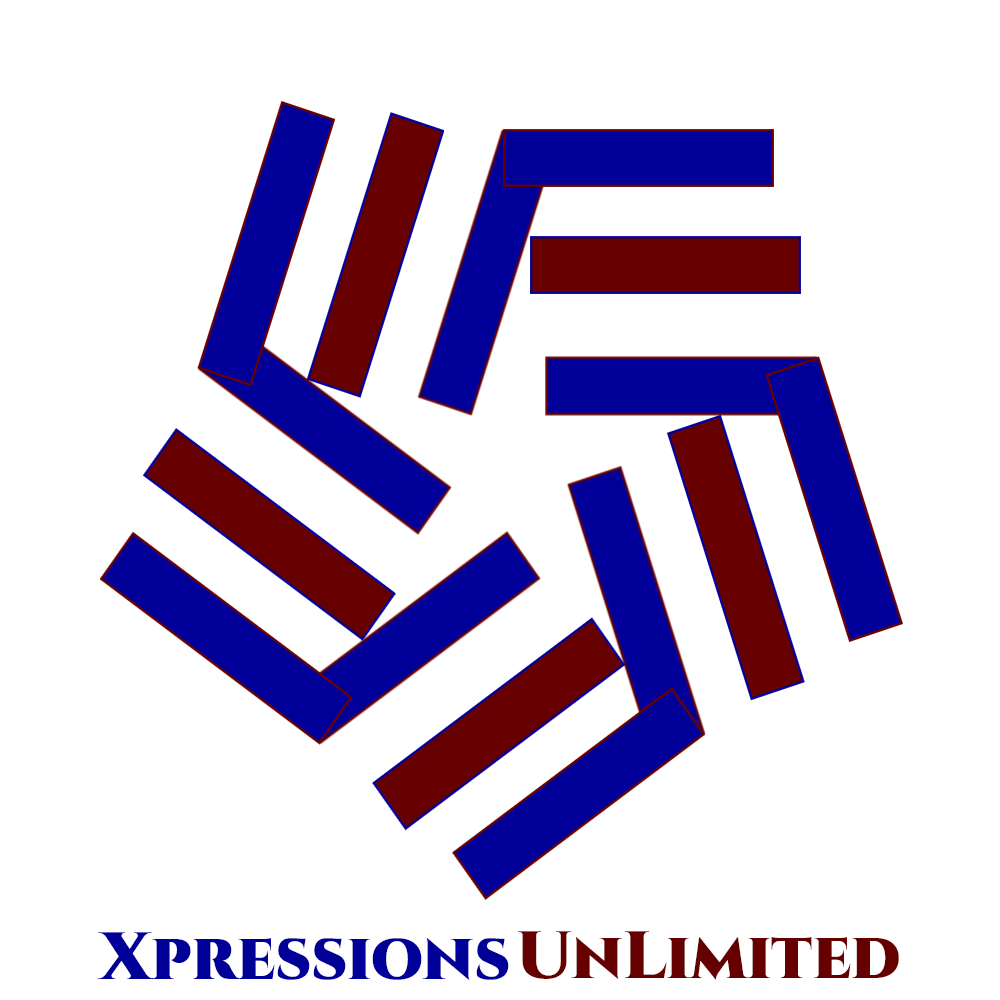
<style>
.page{position:relative;width:1000px;height:1000px;background:#ffffff}
.page>*{position:absolute;margin:0}
.t1{font:66.7px "Cinzel-Black";color:#000099}
.t2{font:66.7px "Cinzel-Black";color:#660000}
</style>
<div class="page">
<p class="t1" style="left:97px;top:932px;width:412px;height:48px">Xpressions</p>
<p class="t2" style="left:518px;top:931px;width:381px;height:49px">UnLimited</p>
</div>
